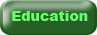
<style>
.page{position:relative;width:97px;height:35px;background:#276027}
.page>*{position:absolute;margin:0}
.t1{font:14px "Arial-Black";color:#66ff66}
</style>
<div class="page">
<p class="t1" style="left:12px;top:11px;width:76px;height:10px">Education</p>
</div>
